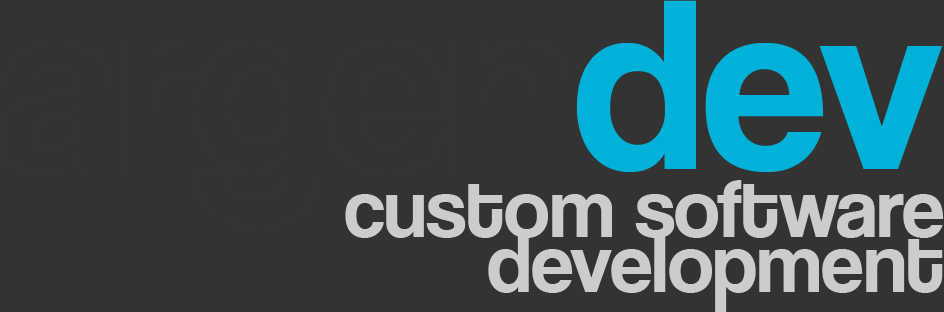
<style>
.page{position:relative;width:944px;height:312px;background:#333333}
.page>*{position:absolute;margin:0}
.t1{font:250px "CoolveticaRg-Regular";color:#333333}
.t2{font:250px "CoolveticaRg-Regular";color:#00b1da}
.t3{font:85px/55px "CoolveticaRg-Regular";color:#cccccc}
</style>
<div class="page">
<p class="t1" style="left:0px;top:0px;width:942px;height:227px">argen<span class="t2">dev</span></p>
<p class="t3" style="left:345px;top:180px;width:599px;height:132px;text-align:right">custom software<br>development</p>
</div>
